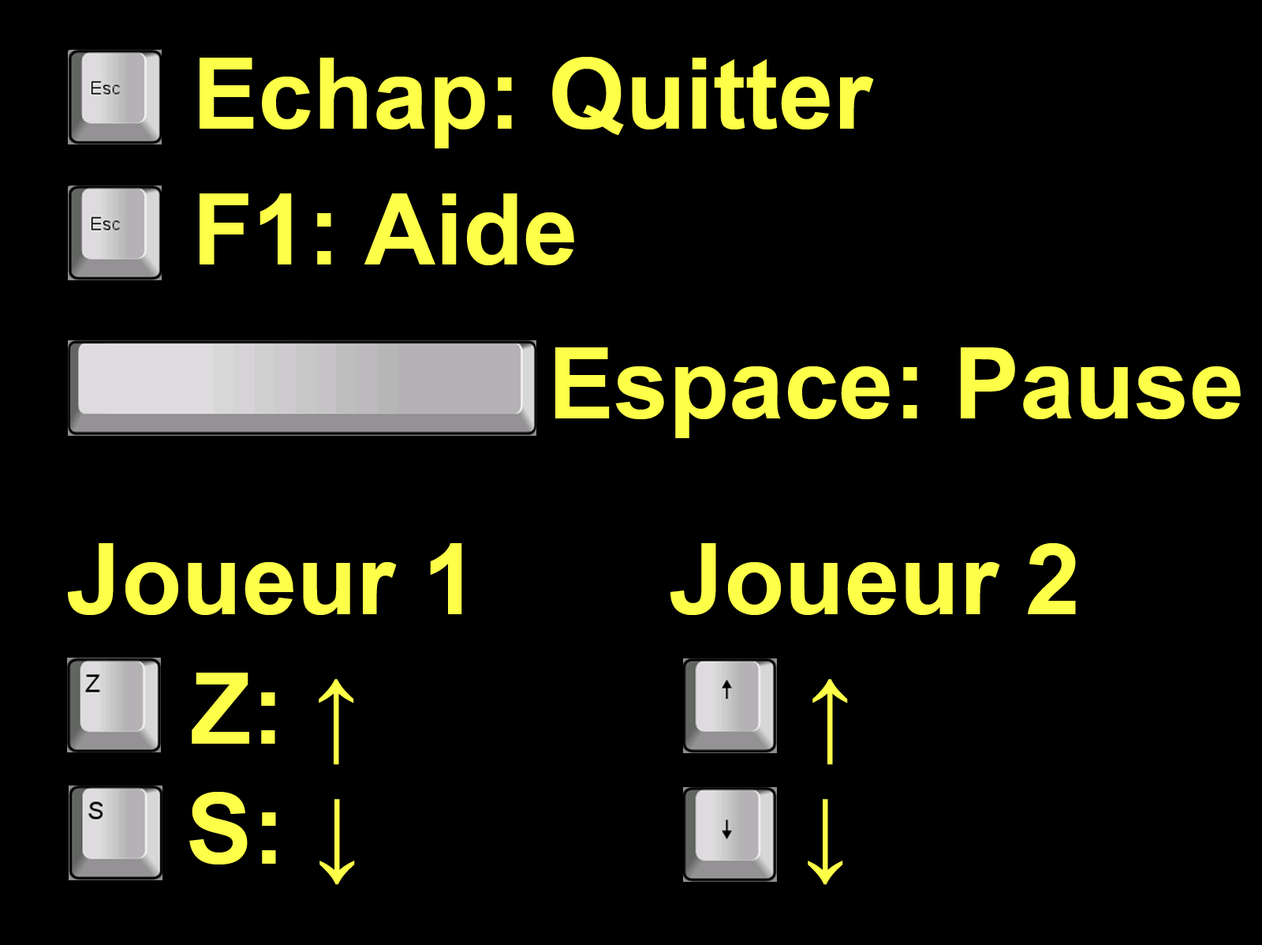
<style>
.page{position:relative;width:1262px;height:945px;background:#000000}
.page>*{position:absolute;margin:0}
.t1{font:98.6px "Arial-BoldMT";color:#fdff48}
</style>
<div class="page">
<p class="t1" style="left:200px;top:57px;width:674px;height:91px">Echap: Quitter</p>
<p class="t1" style="left:200px;top:193px;width:374px;height:72px">F1: Aide</p>
<p class="t1" style="left:555px;top:347px;width:686px;height:91px">Espace: Pause</p>
<p class="t1" style="left:68px;top:543px;width:1008px;height:72px">Joueur 1       Joueur 2</p>
<p class="t1" style="left:192px;top:672px;width:162px;height:93px">Z: ↑</p>
<p class="t1" style="left:813px;top:679px;width:35px;height:86px">↑</p>
<p class="t1" style="left:189px;top:791px;width:166px;height:94px">S: ↓</p>
<p class="t1" style="left:808px;top:799px;width:36px;height:86px">↓</p>
</div>
